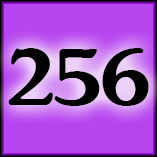
<style>
.page{position:relative;width:157px;height:157px;background:#b644ef}
.page>*{position:absolute;margin:0}
.t1{font:88px "ARJULIAN";color:#000000}
</style>
<div class="page">
<p class="t1" style="left:8px;top:48px;width:141px;height:58px">256</p>
</div>
